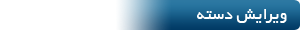
<style>
.page{position:relative;width:300px;height:30px;background:#ffffff}
.page>*{position:absolute;margin:0}
.t1{font:17.4px "BYekan";color:#ffffff}
</style>
<div class="page">
<p class="t1" style="left:197px;top:9px;width:90px;height:14px">ویرایش دسته</p>
</div>
